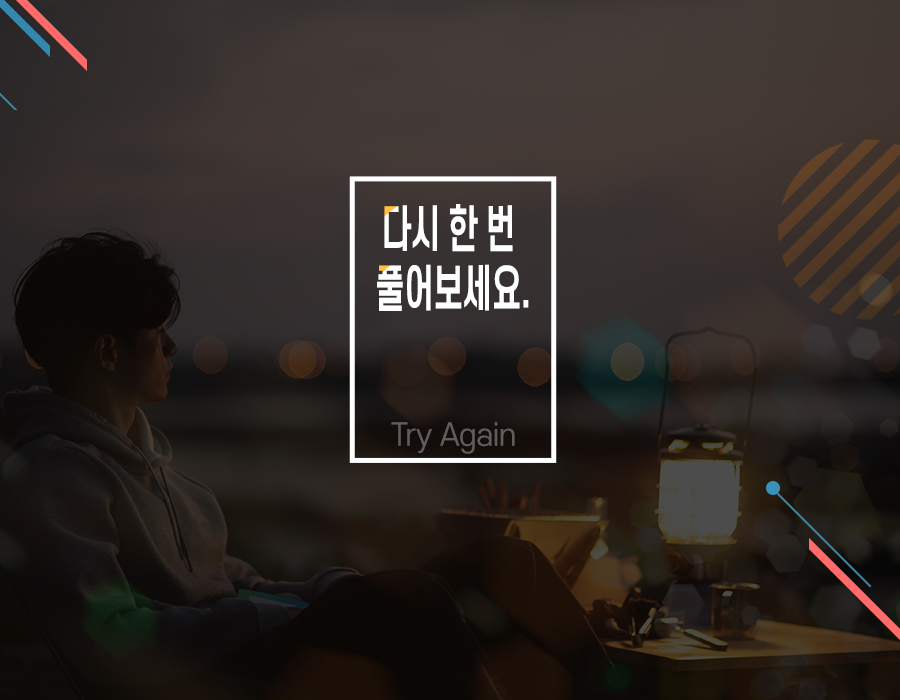
<style>
.page{position:relative;width:900px;height:700px}
.page>*{position:absolute;margin:0}
.t1{font:49.7px "S-CoreDream-6Bold";letter-spacing:-0.025em;color:#ffffff;scale:0.63 1}
.t2{font:30px "S-CoreDream-4Regular";letter-spacing:-0.025em;color:#5f5d5c}
</style>
<div class="page">
<p class="t1" style="left:377px;top:204px;width:152px;height:107px;text-align:center">다시 한 번 <br>풀어보세요.</p>
<p class="t2" style="left:391px;top:422px;width:124px;height:32px">Try Again</p>
</div>
